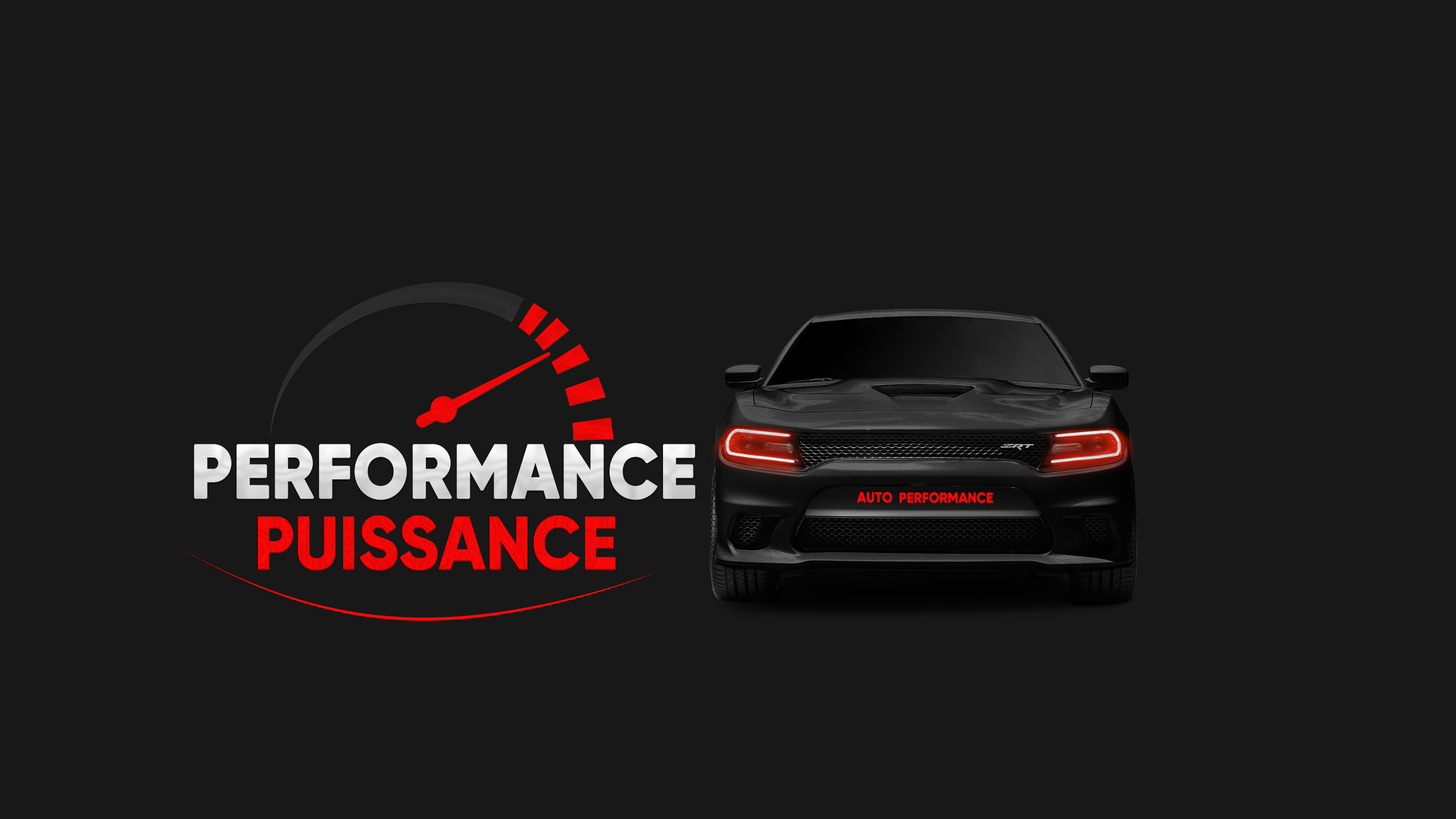
<style>
.page{position:relative;width:1456px;height:819px;background:#181818}
.page>*{position:absolute;margin:0}
.t1{font:74.9px "Gilroy-ExtraBold";color:#dedede;font-weight:bold;scale:0.92 1}
.t2{font:14.5px "Gilroy-ExtraBold";color:#f90808;scale:0.92 1}
.t3{font:74.9px "Gilroy-ExtraBold";color:#f00808;scale:0.92 1}
.t4{font:74.9px "Gilroy-ExtraBold";color:#ef0808;scale:0.92 1}
</style>
<div class="page">
<p class="t1" style="left:194px;top:443px;width:501px;height:57px">PERFORMANCE</p>
<p class="t2" style="left:857px;top:492px;width:35px;height:11px">AUTO</p>
<p class="t2" style="left:899px;top:492px;width:94px;height:11px">PERFORMANCE</p>
<p class="t3" style="left:258px;top:515px;width:357px;height:55px">PUISSANCE</p>
<p class="t3" style="left:258px;top:515px;width:357px;height:55px">PUISSANCE</p>
<p class="t4" style="left:258px;top:517px;width:357px;height:54px">PUISSANCE</p>
<p class="t3" style="left:258px;top:515px;width:357px;height:55px">PUISSANCE</p>
<p class="t3" style="left:258px;top:515px;width:357px;height:55px">PUISSANCE</p>
</div>
